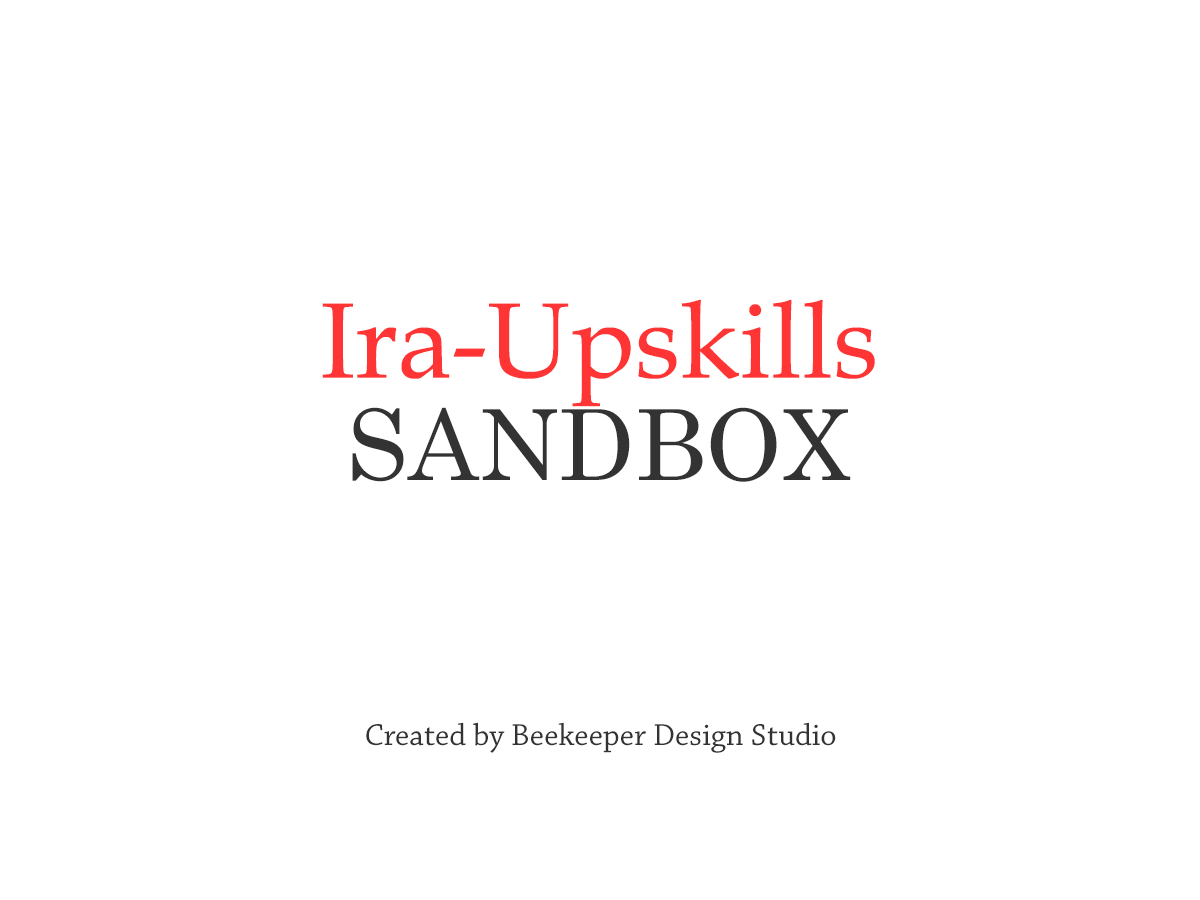
<style>
.page{position:relative;width:1200px;height:900px;background:#ffffff}
.page>*{position:absolute;margin:0}
.t1{font:107px "BookAntiqua";color:#ff3535}
.t2{font:98px "Century";color:#333333}
.t3{font:32px "ChaparralPro-Regular";color:#333333}
</style>
<div class="page">
<p class="t1" style="left:322px;top:299px;width:553px;height:108px">Ira-Upskills</p>
<p class="t2" style="left:352px;top:407px;width:499px;height:75px">SANDBOX</p>
<p class="t3" style="left:366px;top:722px;width:470px;height:31px">Created by Beekeeper Design Studio</p>
</div>
